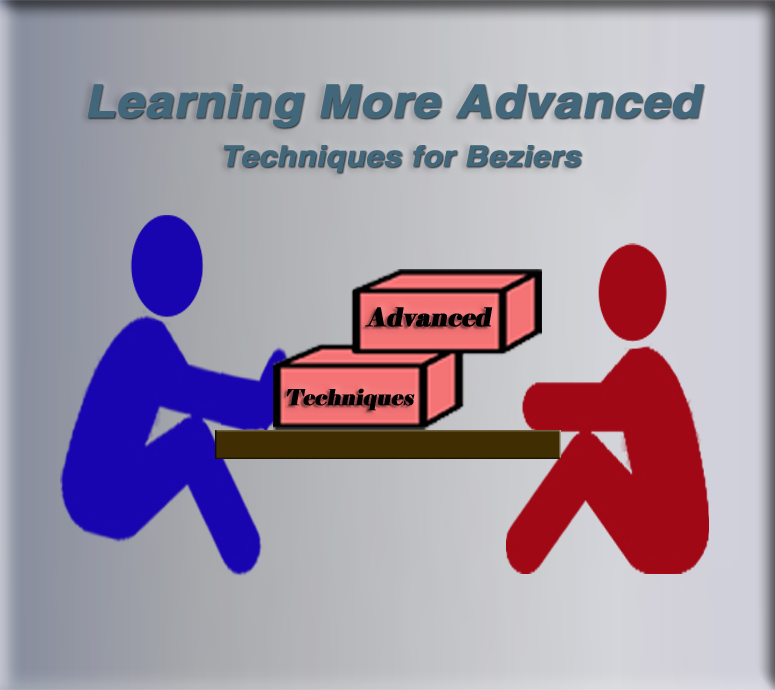
<style>
.page{position:relative;width:775px;height:690px}
.page>*{position:absolute;margin:0}
.t1{font:45.6px "HelveticaLTStd-Bold";color:#42667a;font-weight:bold;font-style:italic;scale:1.08 1}
.t2{font:28.8px "HelveticaLTStd-Bold";color:#42667a;font-weight:bold;font-style:italic;scale:1.08 1}
.t3{font:25.8px "Elephant-Regular";color:#000000;font-weight:bold;font-style:italic;scale:0.96 1}
.t4{font:22.1px "Elephant-Regular";color:#000000;font-weight:bold;font-style:italic;scale:0.96 1}
</style>
<div class="page">
<p class="t1" style="left:87px;top:84px;width:617px;height:44px">Learning More Advanced</p>
<p class="t2" style="left:223px;top:145px;width:359px;height:28px">Techniques for Beziers</p>
<p class="t3" style="left:365px;top:307px;width:128px;height:20px">Advanced</p>
<p class="t4" style="left:286px;top:388px;width:129px;height:23px">Techniques</p>
</div>
